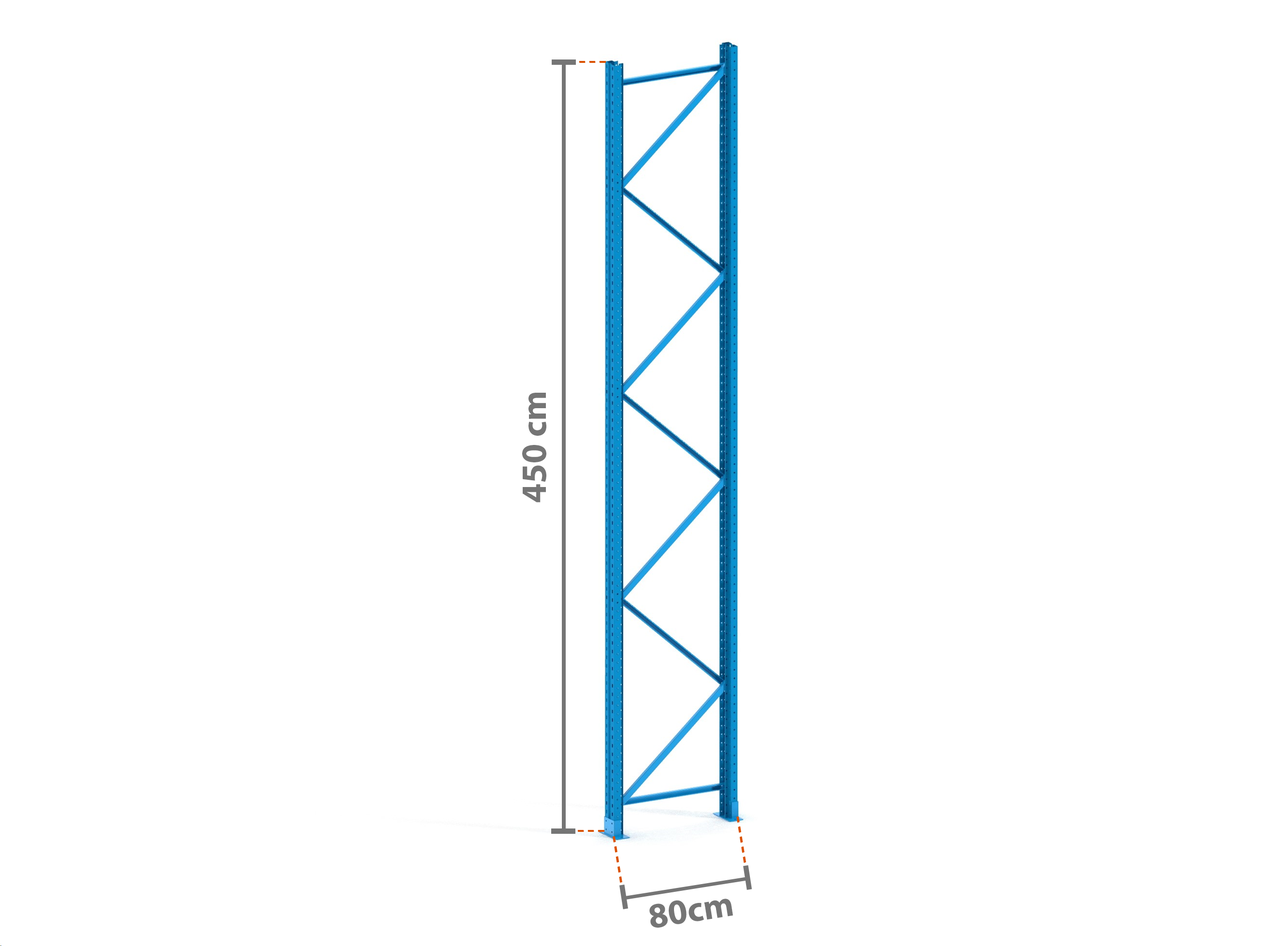
<style>
.page{position:relative;width:1261px;height:946px;background:#ffffff}
.page>*{position:absolute;margin:0}
.t1{font:35.5px "MyriadPro-Bold";color:#757575}
</style>
<div class="page">
<p class="t1" style="left:522px;top:393px;width:24px;height:109px;rotate:-90deg">450 cm</p>
<p class="t1" style="left:649px;top:898px;width:84px;height:29px;rotate:-9deg">80cm</p>
</div>
